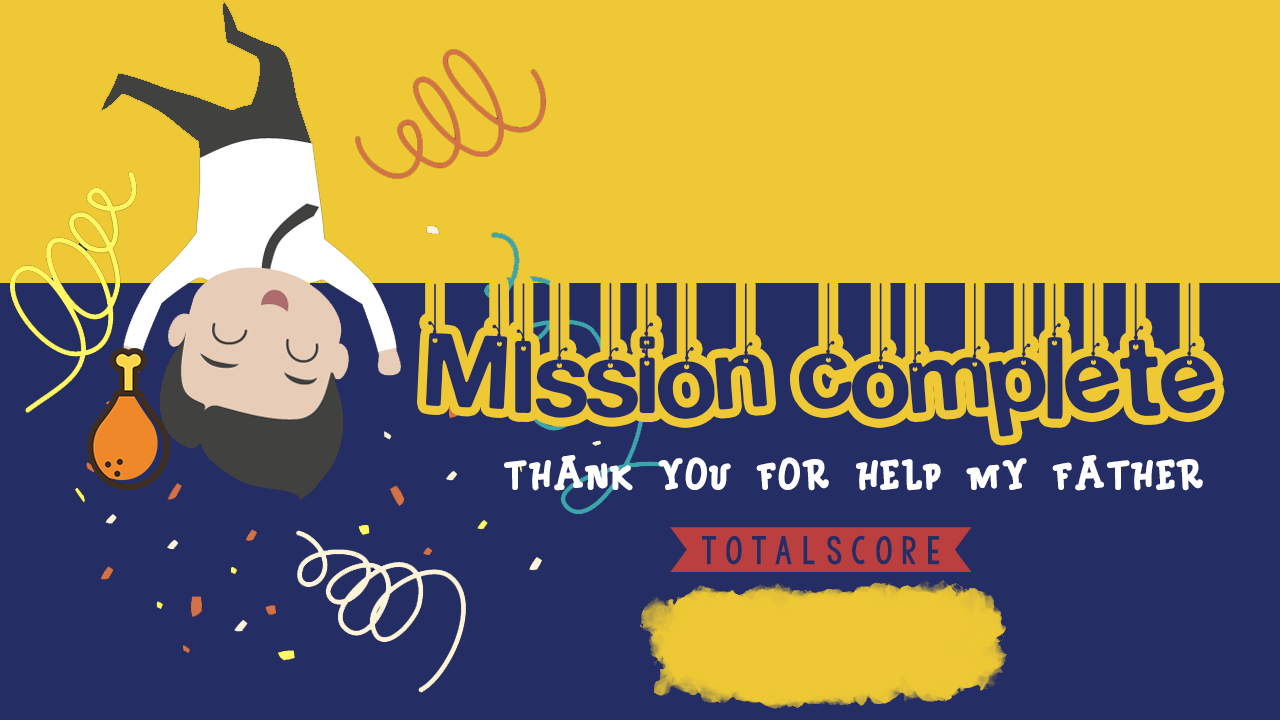
<style>
.page{position:relative;width:1280px;height:720px;background:#eec935}
.page>*{position:absolute;margin:0}
.t1{font:120px "HangingLetters";color:#242d64}
.t2{font:48px "MONICA";color:#ffffff}
.t3{font:60px "KGDefyingGravity";color:#bc3f3f}
</style>
<div class="page">
<p class="t1" style="left:426px;top:283px;width:790px;height:154px">MIssion complete</p>
<p class="t2" style="left:504px;top:455px;width:699px;height:36px">thank you for help my FATHER</p>
<p class="t3" style="left:670px;top:527px;width:302px;height:45px">[TOTALSCORE]</p>
</div>
